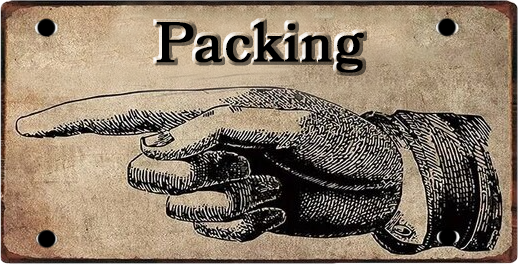
<style>
.page{position:relative;width:519px;height:265px}
.page>*{position:absolute;margin:0}
.t1{font:56px "BookinsanityRemakeRegular";color:#000000;font-weight:bold}
</style>
<div class="page">
<p class="t1" style="left:156px;top:21px;width:208px;height:52px">Packing</p>
</div>
